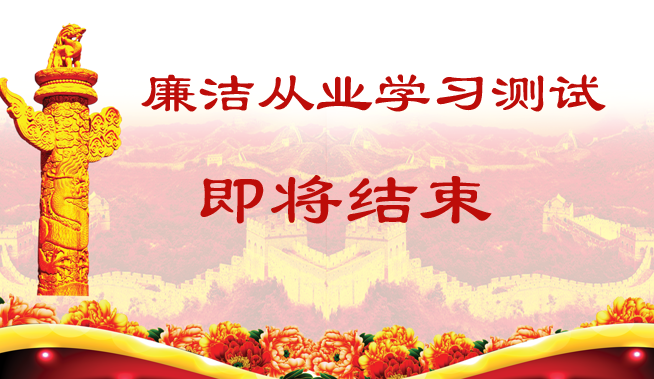
<style>
.page{position:relative;width:654px;height:379px;background:#ffffff}
.page>*{position:absolute;margin:0}
.t1{font:58.3px "LiSu";color:#bd0d09}
.t2{font:75px "LiSu";color:#bd0d09}
</style>
<div class="page">
<p class="t1" style="left:141px;top:74px;width:465px;height:38px">廉洁从业学习测试</p>
<p class="t2" style="left:200px;top:175px;width:292px;height:49px">即将结束</p>
</div>
